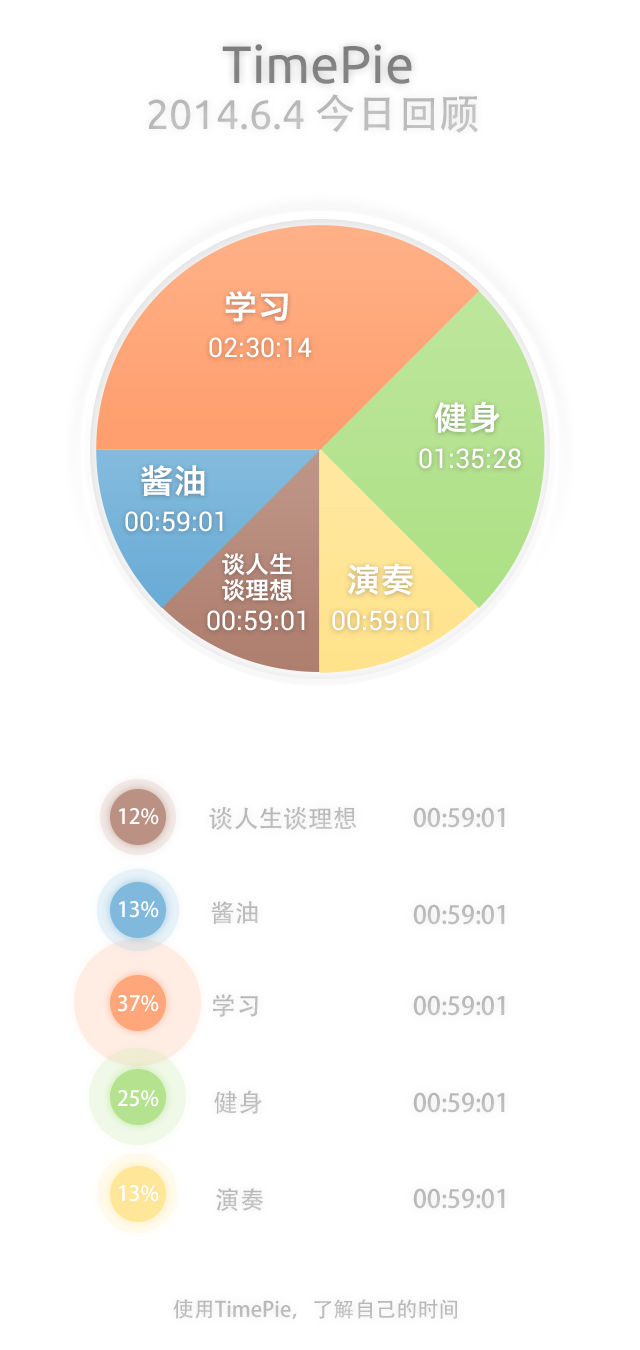
<style>
.page{position:relative;width:640px;height:1350px;background:#ffffff}
.page>*{position:absolute;margin:0}
.t1{font:52.8px "Ubuntu";color:#828282}
.t2{font:41.4px "Ubuntu";color:#bdbdbd}
.t3{font:41.4px "AdobeHeitiStd-Regular";color:#bdbdbd}
.t4{font:33px "HiraginoSansGB-W6";color:#ffffff}
.t5{font:26.6px "Roboto-Regular";color:#ffffff}
.t6{font:23.8px "HiraginoSansGB-W6";color:#ffffff}
.t7{font:20.8px "AdobeHeitiStd-Regular";color:#ffffff}
.t8{font:25px "AdobeHeitiStd-Regular";color:#bbbbbb}
.t9{font:25px "AdobeHeitiStd-Regular";color:#bcbcbc}
.t10{font:25px "AdobeHeitiStd-Regular";color:#bdbdbd}
.t11{font:21.1px "AdobeHeitiStd-Regular";color:#bbbbbb}
</style>
<div class="page">
<p class="t1" style="left:222px;top:44px;width:190px;height:40px">TimePie</p>
<p class="t2" style="left:148px;top:94px;width:330px;height:39px">2014.6.4 <span class="t3">今日回顾</span></p>
<p class="t4" style="left:225px;top:291px;width:63px;height:31px">学习</p>
<p class="t5" style="left:209px;top:337px;width:103px;height:21px">02:30:14</p>
<p class="t4" style="left:434px;top:401px;width:66px;height:32px">健身</p>
<p class="t5" style="left:419px;top:448px;width:102px;height:21px">01:35:28</p>
<p class="t4" style="left:141px;top:465px;width:64px;height:31px">酱油</p>
<p class="t5" style="left:125px;top:511px;width:98px;height:21px">00:59:01</p>
<p class="t6" style="left:222px;top:553px;width:70px;height:23px">谈人生</p>
<p class="t4" style="left:347px;top:563px;width:67px;height:32px">演奏</p>
<p class="t6" style="left:222px;top:579px;width:70px;height:23px">谈理想</p>
<p class="t5" style="left:207px;top:610px;width:98px;height:21px">00:59:01</p>
<p class="t5" style="left:332px;top:610px;width:98px;height:21px">00:59:01</p>
<p class="t7" style="left:119px;top:808px;width:40px;height:17px">12%</p>
<p class="t8" style="left:209px;top:806px;width:148px;height:24px">谈人生谈理想</p>
<p class="t9" style="left:413px;top:807px;width:92px;height:21px">00:59:01</p>
<p class="t7" style="left:119px;top:901px;width:40px;height:17px">13%</p>
<p class="t10" style="left:211px;top:901px;width:47px;height:23px">酱油</p>
<p class="t9" style="left:413px;top:904px;width:92px;height:21px">00:59:01</p>
<p class="t7" style="left:118px;top:995px;width:41px;height:17px">37%</p>
<p class="t8" style="left:213px;top:994px;width:45px;height:23px">学习</p>
<p class="t9" style="left:413px;top:995px;width:92px;height:21px">00:59:01</p>
<p class="t7" style="left:118px;top:1090px;width:41px;height:17px">25%</p>
<p class="t8" style="left:214px;top:1090px;width:48px;height:24px">健身</p>
<p class="t9" style="left:413px;top:1092px;width:92px;height:21px">00:59:01</p>
<p class="t7" style="left:119px;top:1185px;width:40px;height:17px">13%</p>
<p class="t9" style="left:216px;top:1188px;width:48px;height:24px">演奏</p>
<p class="t9" style="left:413px;top:1188px;width:92px;height:21px">00:59:01</p>
<p class="t11" style="left:173px;top:1299px;width:285px;height:20px">使用TimePie，了解自己的时间</p>
</div>
